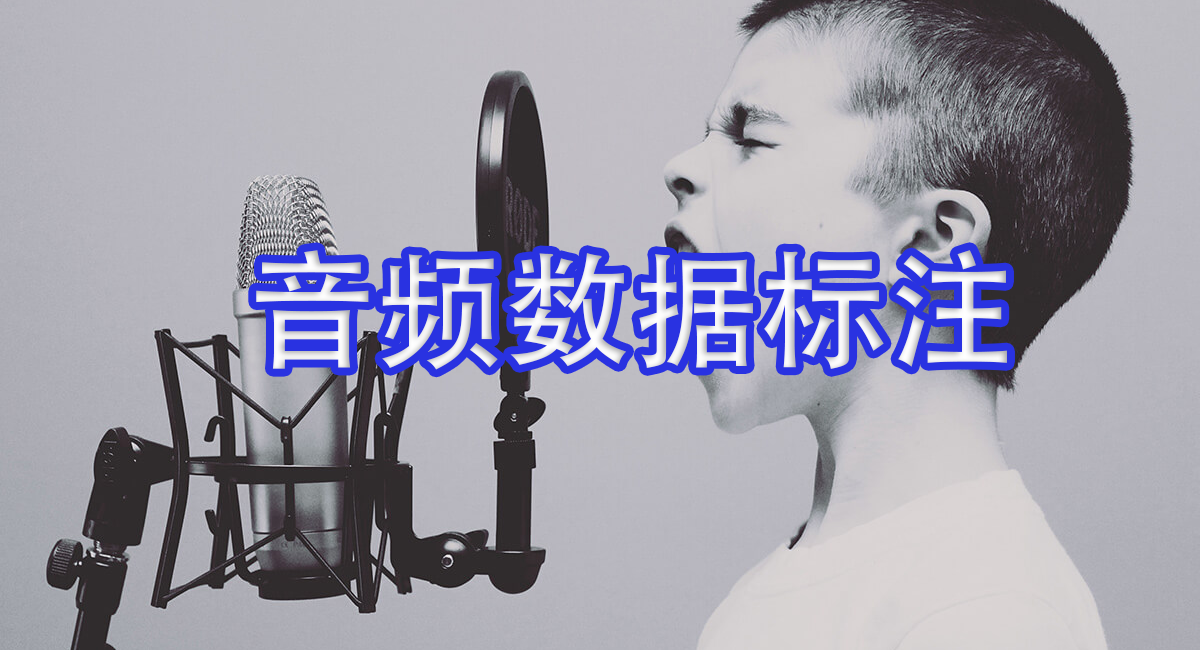
<style>
.page{position:relative;width:1200px;height:650px}
.page>*{position:absolute;margin:0}
.t1{font:128px "AdobeHeitiStd-Regular";color:#ececec}
</style>
<div class="page">
<p class="t1" style="left:256px;top:250px;width:751px;height:120px">音频数据标注</p>
</div>
